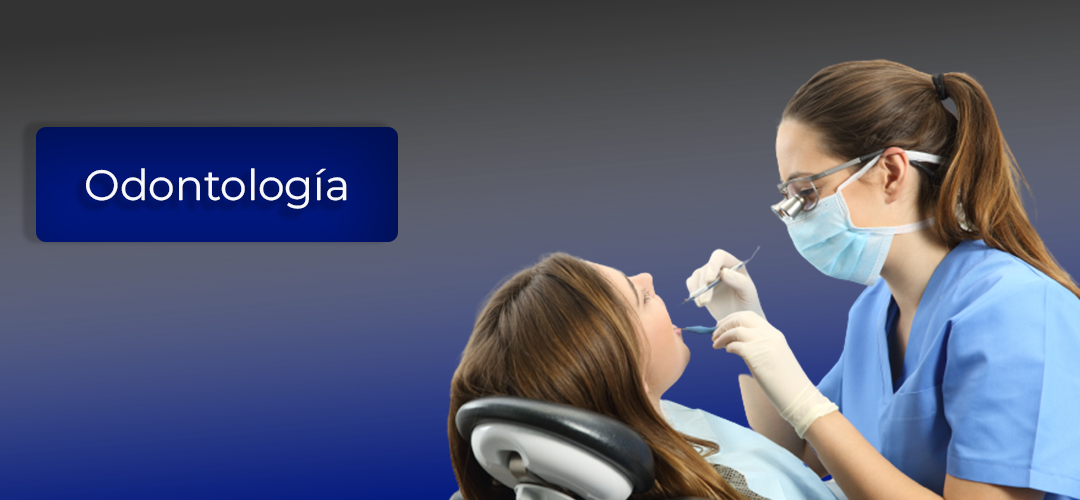
<style>
.page{position:relative;width:1080px;height:500px}
.page>*{position:absolute;margin:0}
.t1{font:42.3px "MontserratThin-Regular";color:#ffffff}
</style>
<div class="page">
<p class="t1" style="left:86px;top:168px;width:261px;height:41px;opacity:0.96">Odontología</p>
</div>
